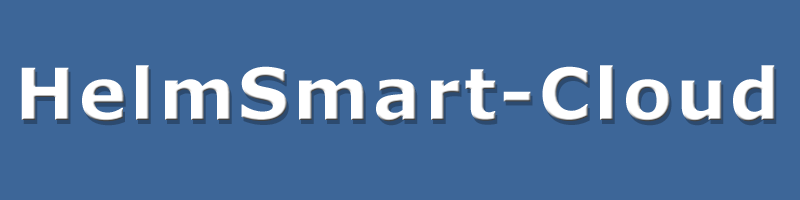
<style>
.page{position:relative;width:800px;height:200px;background:#3d6698}
.page>*{position:absolute;margin:0}
.t1{font:72px "Verdana-Bold";letter-spacing:0.05em;color:#ffffff}
</style>
<div class="page">
<p class="t1" style="left:21px;top:65px;width:754px;height:57px">HelmSmart-Cloud</p>
</div>
